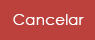
<style>
.page{position:relative;width:95px;height:40px;background:#bc413d}
.page>*{position:absolute;margin:0}
.t1{font:15.4px "CenturyGothic";color:#ffffff}
</style>
<div class="page">
<p class="t1" style="left:13px;top:14px;width:71px;height:11px">Cancelar</p>
</div>
